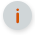
<style>
.page{position:relative;width:35px;height:35px;background:#d0d6d8}
.page>*{position:absolute;margin:0}
.t1{font:20px "ArialRoundedMTBold";color:#d35400}
</style>
<div class="page">
<p class="t1" style="left:16px;top:8px;width:3px;height:16px">i</p>
</div>
